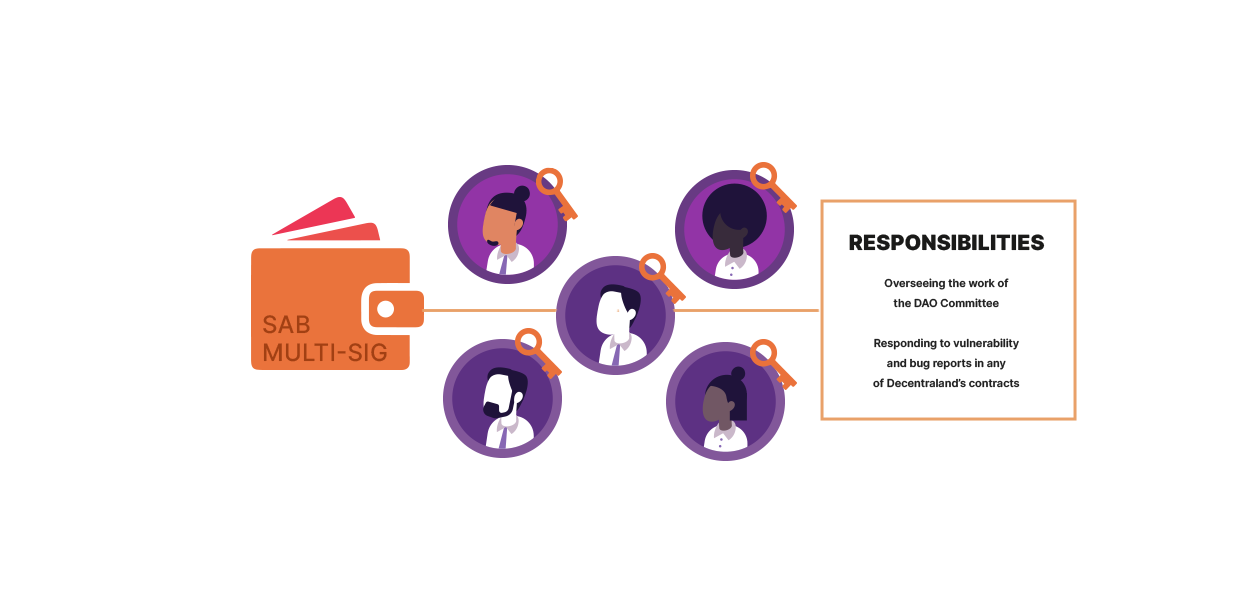
<style>
.page{position:relative;width:1240px;height:600px;background:#ffffff}
.page>*{position:absolute;margin:0}
.t1{font:20.9px "Inter-Black";color:#1a1a19;text-transform:uppercase}
.t2{font:11px/20px "Inter-SemiBold";color:#212121}
.t3{font:24px "Inter-Medium";color:#a24013;text-transform:uppercase}
</style>
<div class="page">
<p class="t1" style="left:849px;top:234px;width:196px;height:17px">Responsibilities</p>
<p class="t2" style="left:873px;top:278px;width:147px;height:110px;text-align:center">Overseeing the work of <br>the DAO Committee<br><br>Responding to vulnerability <br>and bug reports in any <br>of Decentraland’s contracts</p>
<p class="t3" style="left:263px;top:315px;width:124px;height:47px">SAB <br>multi-sig</p>
</div>
